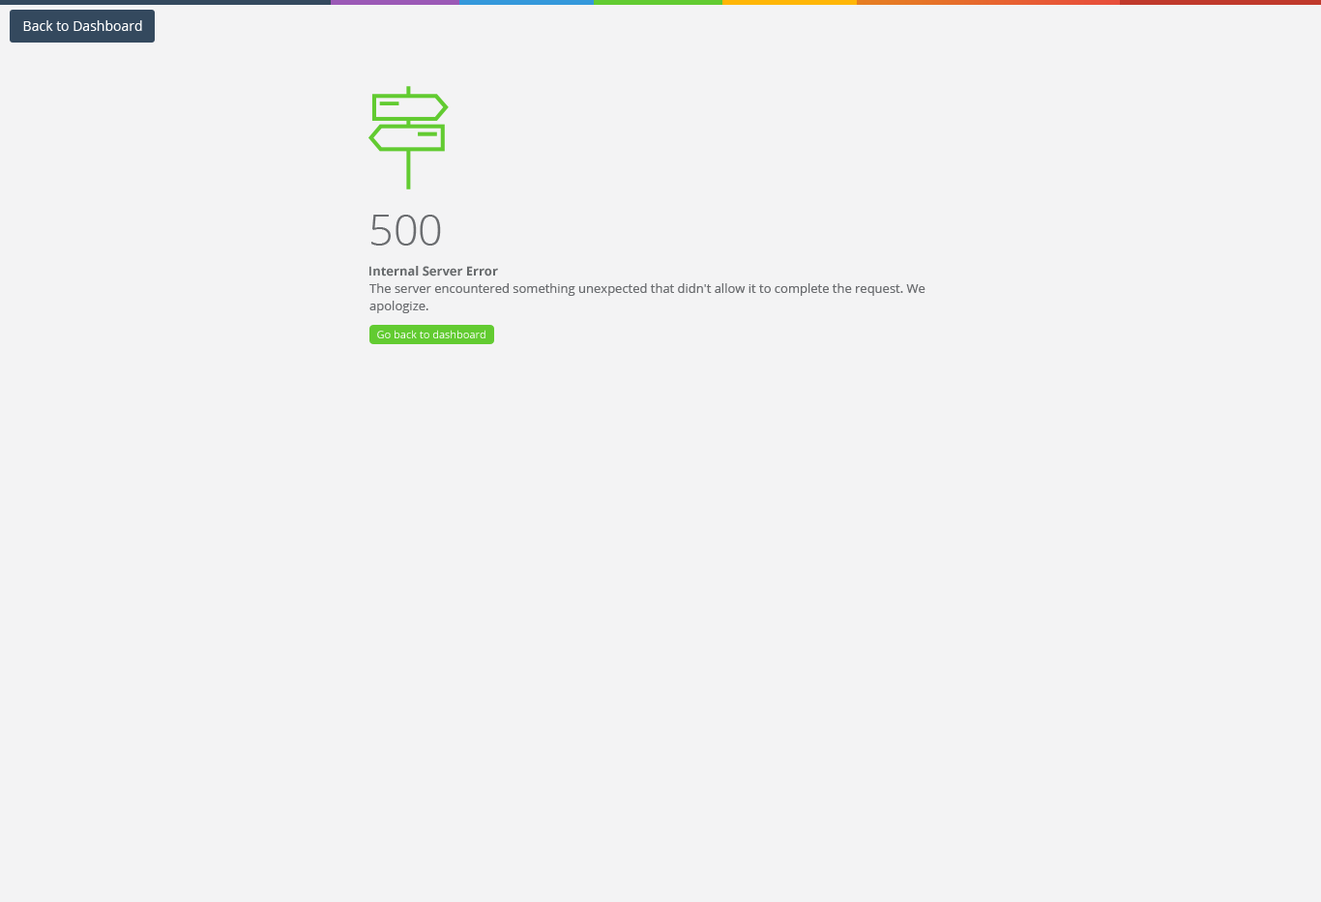
<style>
.page{position:relative;width:1321px;height:902px;background:#f3f3f4}
.page>*{position:absolute;margin:0}
.t1{font:13.5px "OpenSans";color:#ffffff}
.t2{font:43.5px "OpenSans-Light";color:#6a6c6f}
.t3{font:12.6px "OpenSans-Bold";color:#676a6c}
.t4{font:12.6px/17.4px "OpenSans";color:#6a6c6f}
.t5{font:10.6px "OpenSans";color:#ffffff}
</style>
<div class="page">
<p class="t1" style="left:23px;top:20px;width:119px;height:11px">Back to Dashboard</p>
<p class="t2" style="left:371px;top:215px;width:70px;height:31px">500</p>
<p class="t3" style="left:369px;top:266px;width:129px;height:11px">Internal Server Error</p>
<p class="t4" style="left:369px;top:283px;width:557px;height:30px">The server encountered something unexpected that didn't allow it to complete the request. We apologize.</p>
<p class="t5" style="left:377px;top:330px;width:109px;height:9px">Go back to dashboard</p>
</div>
